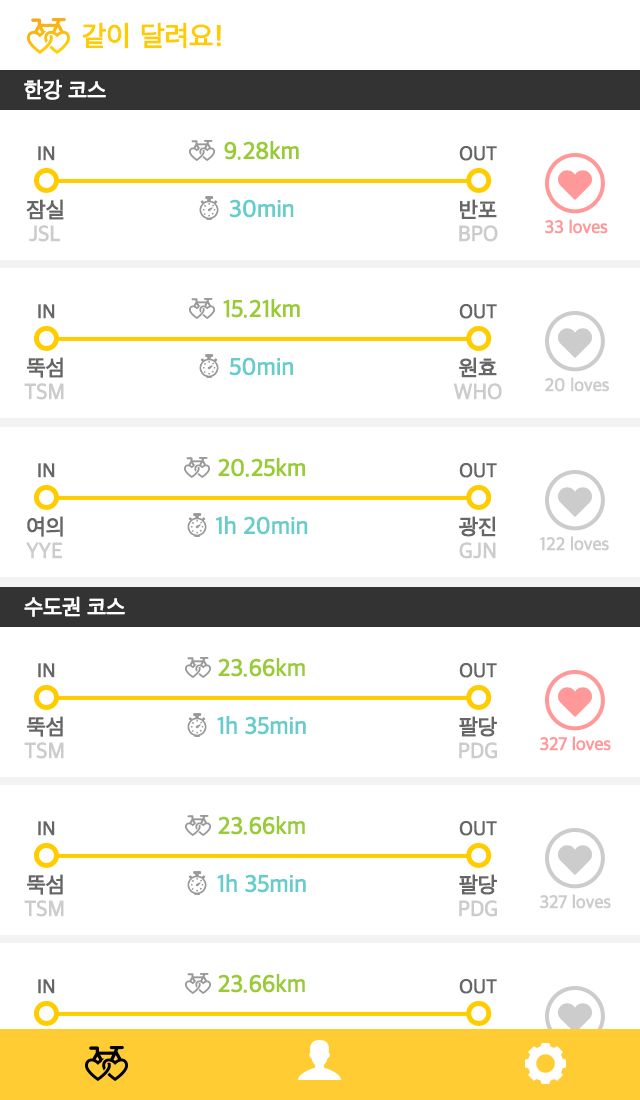
<style>
.page{position:relative;width:640px;height:1100px;background:#ffffff}
.page>*{position:absolute;margin:0}
.t1{font:28px "AppleSDGothicNeo-Regular";letter-spacing:-0.025em;color:#ffcc00;font-weight:bold}
.t2{font:28px "Verdana";letter-spacing:-0.025em;color:#ffcc00;font-weight:bold}
.t3{font:22px "AppleSDGothicNeo-Regular";letter-spacing:-0.025em;color:#ffffff;font-weight:bold}
.t4{font:20px "AppleSDGothicNeo-Regular";letter-spacing:-0.025em;color:#666666;font-weight:bold}
.t5{font:24px "AppleSDGothicNeo-Regular";letter-spacing:-0.025em;color:#99cc33;font-weight:bold}
.t6{font:22px "AppleSDGothicNeo-Regular";letter-spacing:-0.025em;color:#666666;font-weight:bold}
.t7{font:24px "AppleSDGothicNeo-Regular";letter-spacing:-0.025em;color:#66cccc;font-weight:bold}
.t8{font:18.1px "AppleSDGothicNeo-Regular";letter-spacing:-0.025em;color:#ff9999;font-weight:bold}
.t9{font:22px "AppleSDGothicNeo-Regular";letter-spacing:-0.025em;color:#cccccc;font-weight:bold}
.t10{font:18.1px "AppleSDGothicNeo-Regular";letter-spacing:-0.025em;color:#cccccc;font-weight:bold}
</style>
<div class="page">
<p class="t1" style="left:82px;top:22px;width:139px;height:27px">같이 달려요<span class="t2">!</span></p>
<p class="t3" style="left:24px;top:79px;width:82px;height:21px">한강 코스</p>
<p class="t4" style="left:38px;top:146px;width:17px;height:15px">IN</p>
<p class="t5" style="left:224px;top:141px;width:75px;height:19px">9.28km</p>
<p class="t4" style="left:459px;top:146px;width:38px;height:15px">OUT</p>
<p class="t6" style="left:26px;top:199px;width:38px;height:21px">잠실</p>
<p class="t7" style="left:229px;top:199px;width:65px;height:19px">30min</p>
<p class="t6" style="left:460px;top:199px;width:37px;height:20px">반포</p>
<p class="t8" style="left:545px;top:219px;width:63px;height:15px">33 loves</p>
<p class="t9" style="left:29px;top:225px;width:31px;height:17px">JSL</p>
<p class="t9" style="left:459px;top:225px;width:39px;height:17px">BPO</p>
<p class="t4" style="left:38px;top:304px;width:17px;height:15px">IN</p>
<p class="t5" style="left:223px;top:299px;width:77px;height:19px">15.21km</p>
<p class="t4" style="left:459px;top:304px;width:38px;height:15px">OUT</p>
<p class="t6" style="left:27px;top:357px;width:36px;height:21px">뚝섬</p>
<p class="t7" style="left:229px;top:357px;width:64px;height:19px">50min</p>
<p class="t6" style="left:459px;top:357px;width:38px;height:21px">원효</p>
<p class="t10" style="left:545px;top:377px;width:64px;height:15px">20 loves</p>
<p class="t9" style="left:24px;top:383px;width:40px;height:17px">TSM</p>
<p class="t9" style="left:453px;top:383px;width:49px;height:17px">WHO</p>
<p class="t5" style="left:218px;top:458px;width:87px;height:19px">20.25km</p>
<p class="t4" style="left:38px;top:463px;width:17px;height:15px">IN</p>
<p class="t4" style="left:459px;top:463px;width:38px;height:15px">OUT</p>
<p class="t6" style="left:27px;top:516px;width:36px;height:21px">여의</p>
<p class="t7" style="left:216px;top:516px;width:92px;height:19px">1h 20min</p>
<p class="t6" style="left:459px;top:516px;width:37px;height:21px">광진</p>
<p class="t9" style="left:26px;top:542px;width:36px;height:17px">YYE</p>
<p class="t9" style="left:459px;top:542px;width:37px;height:17px">GJN</p>
<p class="t10" style="left:540px;top:536px;width:69px;height:15px">122 loves</p>
<p class="t3" style="left:24px;top:596px;width:101px;height:21px">수도권 코스</p>
<p class="t4" style="left:38px;top:663px;width:17px;height:15px">IN</p>
<p class="t5" style="left:218px;top:658px;width:87px;height:19px">23.66km</p>
<p class="t4" style="left:459px;top:663px;width:38px;height:15px">OUT</p>
<p class="t6" style="left:27px;top:716px;width:36px;height:21px">뚝섬</p>
<p class="t7" style="left:217px;top:716px;width:89px;height:19px">1h 35min</p>
<p class="t6" style="left:459px;top:716px;width:38px;height:21px">팔당</p>
<p class="t8" style="left:540px;top:736px;width:71px;height:15px">327 loves</p>
<p class="t9" style="left:24px;top:742px;width:40px;height:17px">TSM</p>
<p class="t9" style="left:459px;top:742px;width:38px;height:17px">PDG</p>
<p class="t4" style="left:38px;top:821px;width:17px;height:15px">IN</p>
<p class="t5" style="left:218px;top:816px;width:87px;height:19px">23.66km</p>
<p class="t4" style="left:459px;top:821px;width:38px;height:15px">OUT</p>
<p class="t6" style="left:27px;top:874px;width:36px;height:21px">뚝섬</p>
<p class="t7" style="left:217px;top:874px;width:89px;height:19px">1h 35min</p>
<p class="t6" style="left:459px;top:874px;width:38px;height:21px">팔당</p>
<p class="t10" style="left:540px;top:894px;width:71px;height:15px">327 loves</p>
<p class="t9" style="left:24px;top:900px;width:40px;height:17px">TSM</p>
<p class="t9" style="left:459px;top:900px;width:38px;height:17px">PDG</p>
<p class="t5" style="left:218px;top:974px;width:87px;height:19px">23.66km</p>
<p class="t4" style="left:38px;top:979px;width:17px;height:15px">IN</p>
<p class="t4" style="left:459px;top:979px;width:38px;height:15px">OUT</p>
</div>
